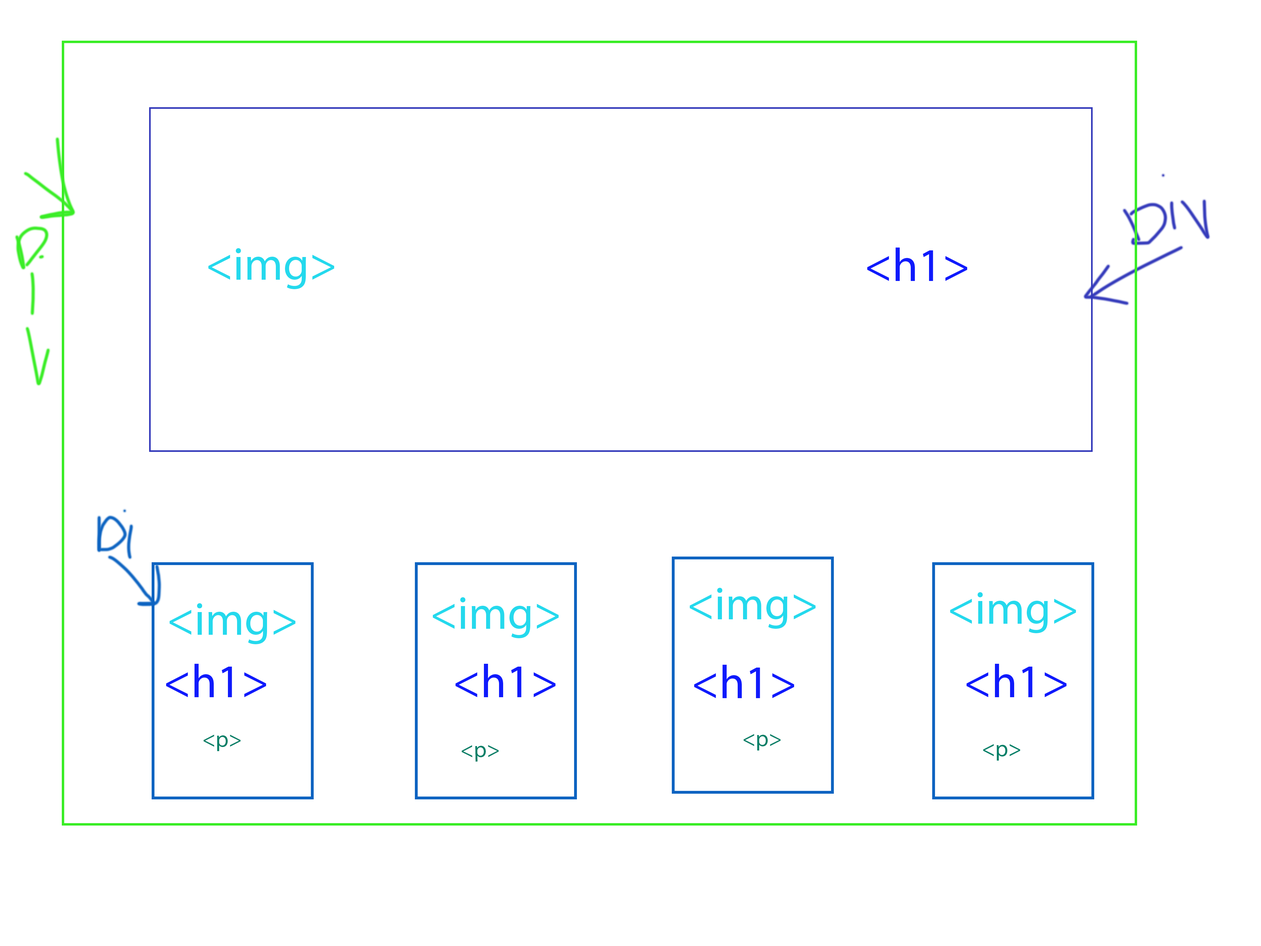
<style>
.page{position:relative;width:1261px;height:946px;background:#ffffff}
.page>*{position:absolute;margin:0}
.t1{font:46.9px "MyriadPro-Regular";color:#24d9ed}
.t2{font:46.9px "MyriadPro-Regular";color:#0f1afc}
.t3{font:22.7px "MyriadPro-Regular";color:#037f67}
</style>
<div class="page">
<p class="t1" style="left:208px;top:248px;width:126px;height:41px">&lt;img&gt;</p>
<p class="t2" style="left:867px;top:247px;width:100px;height:34px">&lt;h1&gt;</p>
<p class="t1" style="left:690px;top:588px;width:125px;height:41px">&lt;img&gt;</p>
<p class="t1" style="left:950px;top:592px;width:126px;height:41px">&lt;img&gt;</p>
<p class="t1" style="left:170px;top:603px;width:125px;height:41px">&lt;img&gt;</p>
<p class="t1" style="left:433px;top:597px;width:126px;height:41px">&lt;img&gt;</p>
<p class="t2" style="left:166px;top:664px;width:100px;height:33px">&lt;h1&gt;</p>
<p class="t2" style="left:456px;top:664px;width:99px;height:33px">&lt;h1&gt;</p>
<p class="t2" style="left:694px;top:665px;width:100px;height:33px">&lt;h1&gt;</p>
<p class="t2" style="left:966px;top:664px;width:100px;height:33px">&lt;h1&gt;</p>
<p class="t3" style="left:203px;top:734px;width:38px;height:17px">&lt;p&gt;</p>
<p class="t3" style="left:743px;top:734px;width:38px;height:16px">&lt;p&gt;</p>
<p class="t3" style="left:461px;top:745px;width:38px;height:17px;rotate:-1deg">&lt;p&gt;</p>
</div>
